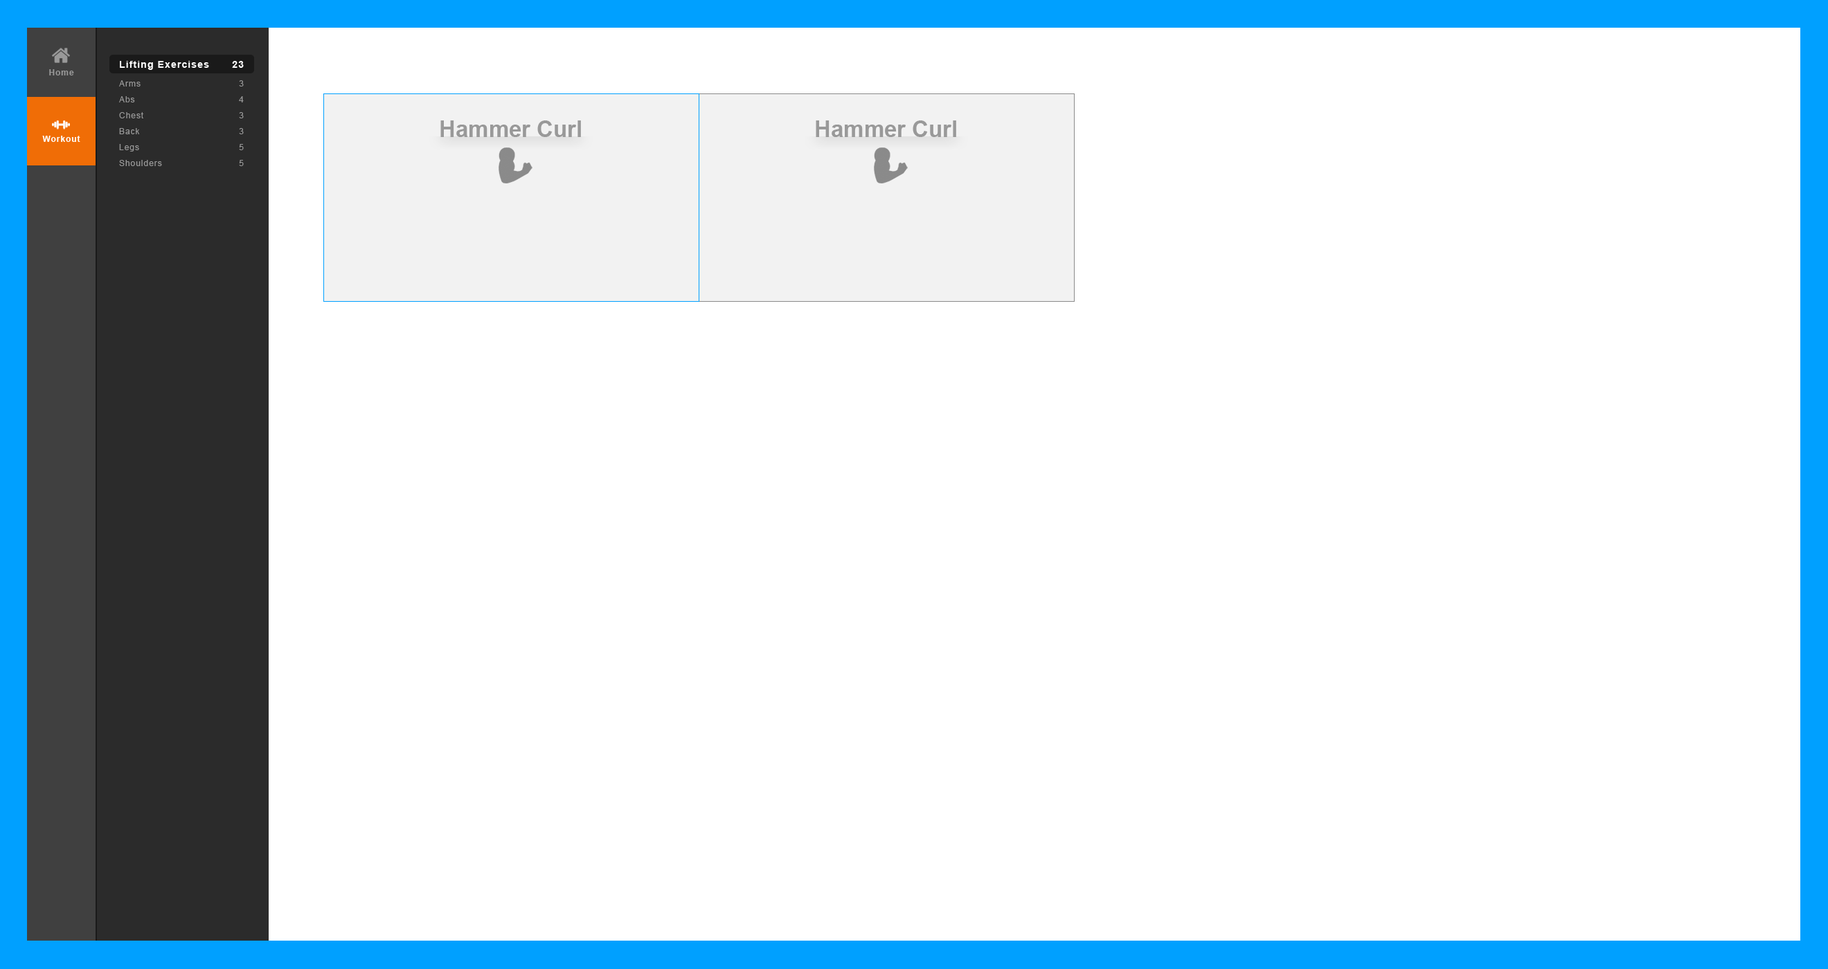
<style>
.page{position:relative;width:1828px;height:969px;background:#ffffff}
.page>*{position:absolute;margin:0}
.t1{font:9.7px "Arial-BoldMT";letter-spacing:0.08em;color:#ffffff}
.t2{font:8.3px "Arial-BoldMT";letter-spacing:0.08em;color:#999999}
.t3{font:8.3px/15.9px "ArialMT";letter-spacing:0.08em;color:#999999}
.t4{font:22.8px "Arial-BoldMT";color:#999999}
.t5{font:8.3px "Arial-BoldMT";letter-spacing:0.08em;color:#ffffff}
</style>
<div class="page">
<p class="t1" style="left:120px;top:61px;width:89px;height:9px">Lifting Exercises</p>
<p class="t1" style="left:232px;top:61px;width:12px;height:7px">23</p>
<p class="t2" style="left:49px;top:69px;width:25px;height:6px">Home</p>
<p class="t3" style="left:119px;top:80px;width:43px;height:86px">Arms<br>Abs<br>Chest<br>Back<br>Legs<br>Shoulders</p>
<p class="t3" style="left:239px;top:80px;width:5px;height:86px;text-align:right">3<br>4<br>3<br>3<br>5<br>5</p>
<p class="t4" style="left:440px;top:120px;width:141px;height:17px">Hammer Curl</p>
<p class="t4" style="left:816px;top:120px;width:140px;height:17px">Hammer Curl</p>
<p class="t5" style="left:42px;top:136px;width:38px;height:6px">Workout</p>
</div>
